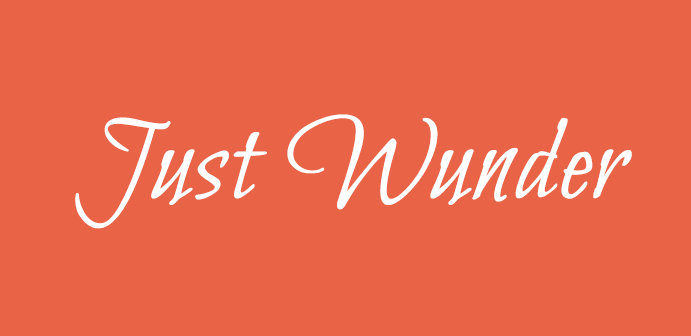
<style>
.page{position:relative;width:691px;height:336px;background:#e96346}
.page>*{position:absolute;margin:0}
.t1{font:120px "BilboSwashCaps-Regular";color:#ffffff;font-weight:bold}
</style>
<div class="page">
<p class="t1" style="left:75px;top:114px;width:557px;height:115px">Just Wunder</p>
</div>
